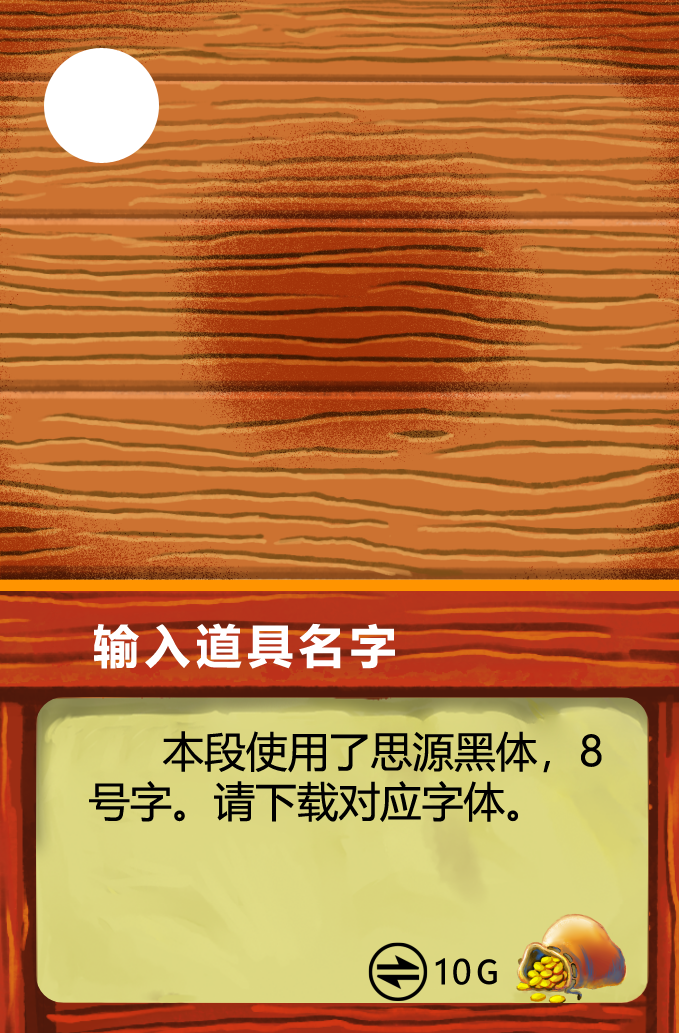
<style>
.page{position:relative;width:679px;height:1033px}
.page>*{position:absolute;margin:0}
.t1{font:45.8px "MicrosoftYaHei-Bold";letter-spacing:0.12em;color:#ffffff}
.t2{font:41.7px/50px "MicrosoftYaHei";color:#000000}
.t3{font:33.3px "MicrosoftYaHei";color:#000000}
</style>
<div class="page">
<p class="t1" style="left:94px;top:623px;width:301px;height:46px">输入道具名字</p>
<p class="t2" style="left:89px;top:731px;width:513px;height:91px">本段使用了思源黑体，8<br>号字。请下载对应字体。</p>
<p class="t3" style="left:435px;top:958px;width:36px;height:27px">10</p>
</div>
